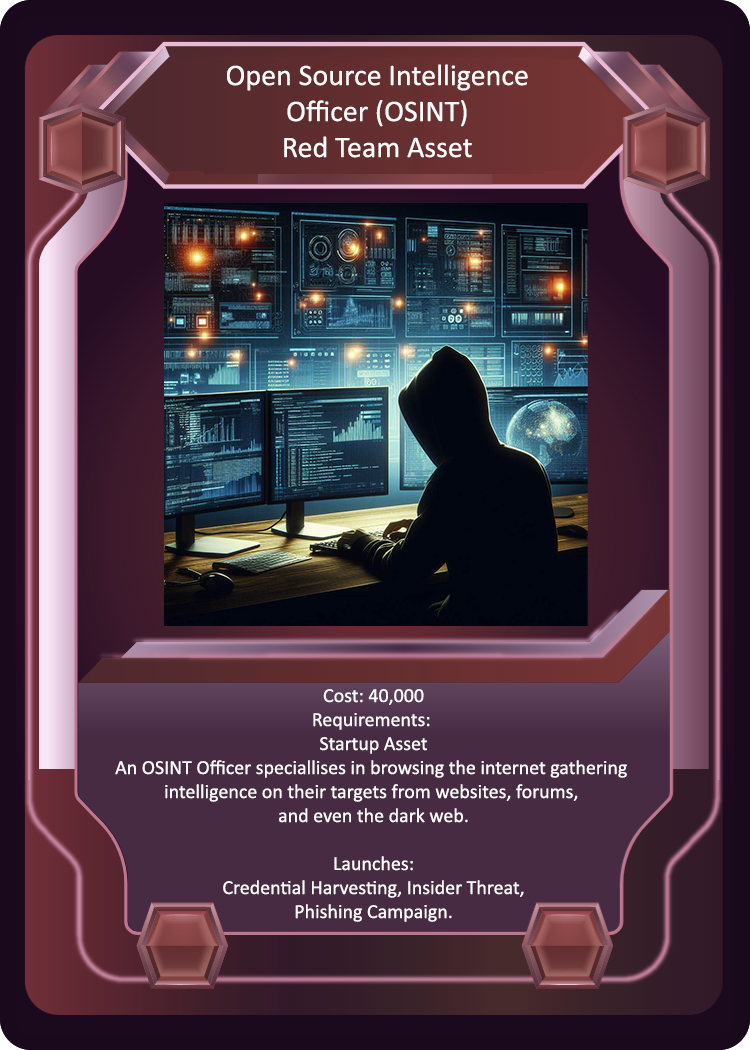
<style>
.page{position:relative;width:750px;height:1050px}
.page>*{position:absolute;margin:0}
.t1{font:30px "Calibri";color:#fcfbfb}
.t2{font:20px "Calibri";color:#fcfbfb}
</style>
<div class="page">
<p class="t1" style="left:227px;top:64px;width:301px;height:94px;text-align:center">Open Source Intelligence<br>Officer (OSINT)<br>Red Team Asset</p>
<p class="t2" style="left:115px;top:689px;width:512px;height:233px;text-align:center">Cost: 40,000<br>Requirements: <br>Startup Asset<br>An OSINT Officer speciallises in browsing the internet gathering <br>intelligence on their targets from websites, forums, <br>and even the dark web.<br><br>Launches:<br>Credential Harvesting, Insider Threat,<br>Phishing Campaign.</p>
</div>
